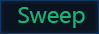
<style>
.page{position:relative;width:99px;height:34px;background:#0a1421}
.page>*{position:absolute;margin:0}
.t1{font:23.3px "SegoeUISymbol";color:#19b579}
</style>
<div class="page">
<p class="t1" style="left:18px;top:7px;width:67px;height:21px">Sweep</p>
</div>
